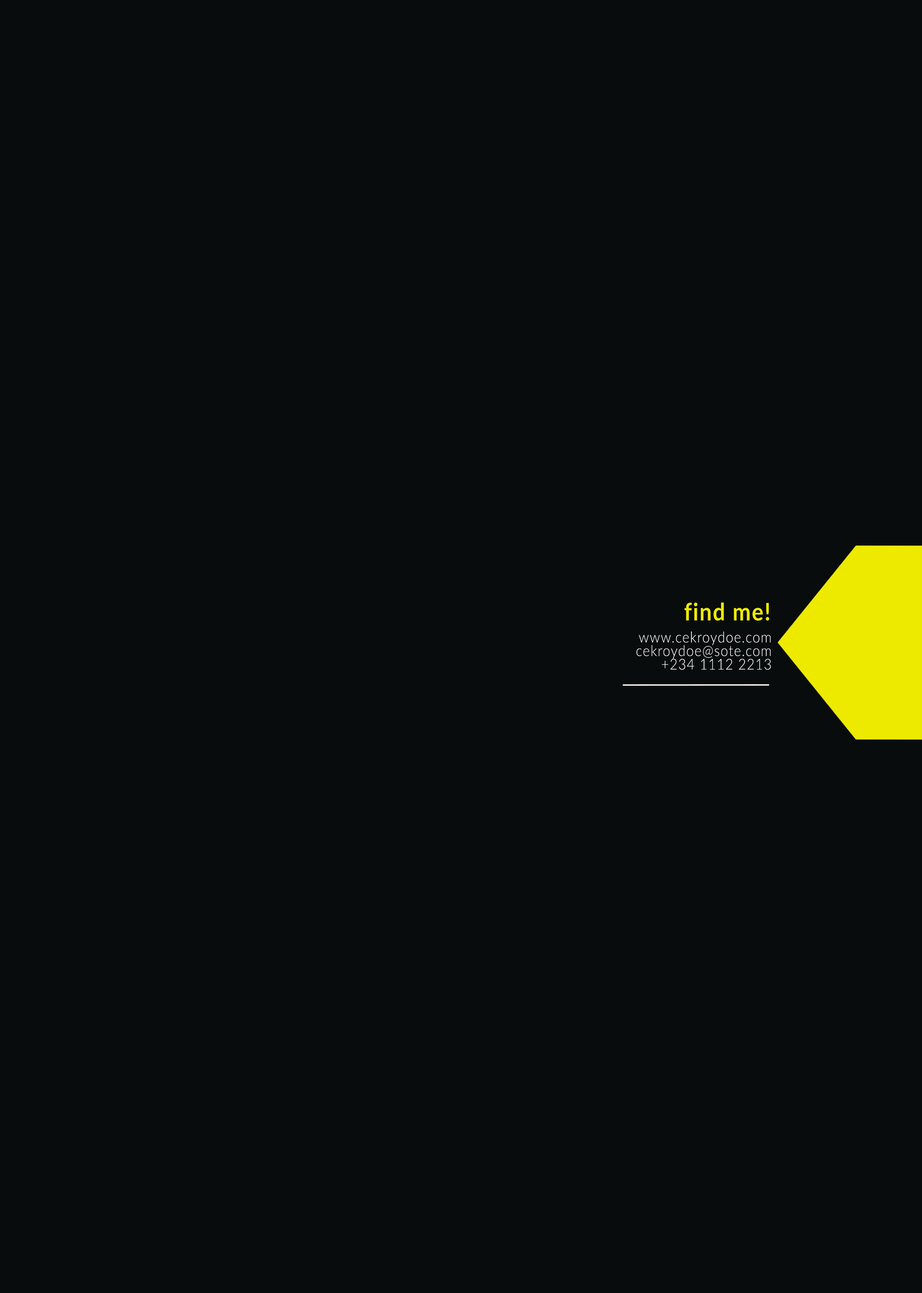
<style>
.page{position:relative;width:922px;height:1293px;background:#090c0c}
.page>*{position:absolute;margin:0}
.t1{font:24.1px "Lato-Bold";letter-spacing:0.05em;color:#edea00;scale:0.9 1}
.t2{font:15.1px/13.6px "Lato-Light";letter-spacing:0.05em;color:#ffffff;scale:0.9 1}
</style>
<div class="page">
<p class="t1" style="left:684px;top:602px;width:85px;height:19px">find me!</p>
<p class="t2" style="left:636px;top:632px;width:135px;height:38px;text-align:right">www.cekroydoe.com<br>cekroydoe@sote.com<br>+234 1112 2213</p>
</div>
